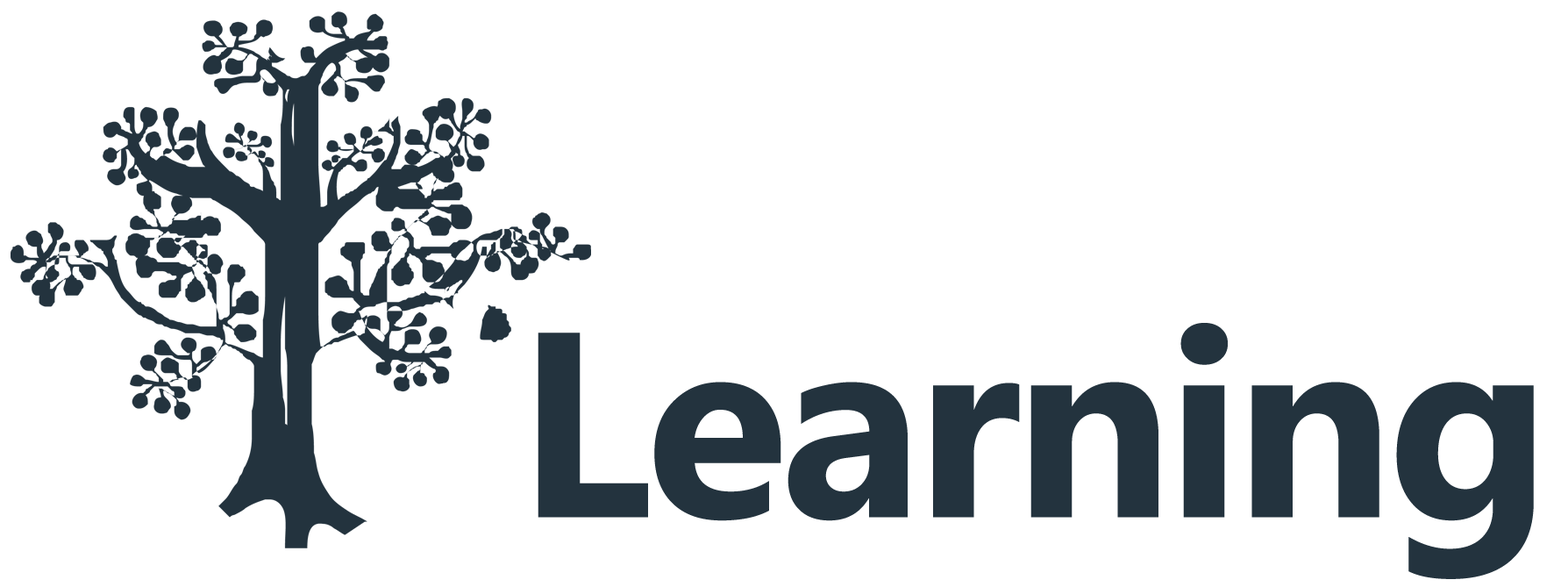
<style>
.page{position:relative;width:1568px;height:587px;background:#ffffff}
.page>*{position:absolute;margin:0}
.t1{font:263.1px "Ebrima-Bold";letter-spacing:-0.025em;color:#23333e}
.t2{font:263.1px "Ebrima-Bold";letter-spacing:-0.025em;color:#ffffff}
</style>
<div class="page">
<p class="t1" style="left:390px;top:323px;width:1144px;height:256px"><span class="t2">e</span>Learning</p>
</div>
